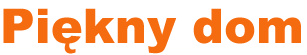
<style>
.page{position:relative;width:307px;height:55px;background:#ffffff}
.page>*{position:absolute;margin:0}
.t1{font:48px "Arial-Black";color:#f56b0f}
</style>
<div class="page">
<p class="t1" style="left:3px;top:8px;width:298px;height:46px">Piękny dom</p>
</div>
